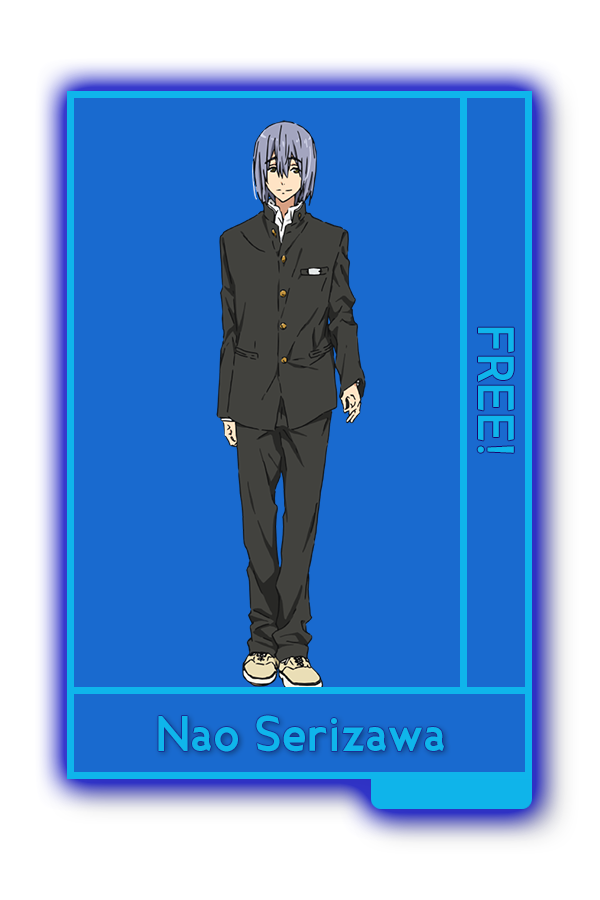
<style>
.page{position:relative;width:600px;height:900px;background:#196acf}
.page>*{position:absolute;margin:0}
.t1{font:47.8px "Ancillary-Bold";color:#0fb5eb}
.t2{font:46.7px "Ancillary-Bold";color:#0fb5eb}
</style>
<div class="page">
<p class="t1" style="left:477px;top:327px;width:37px;height:126px;rotate:90deg">FREE!</p>
<p class="t2" style="left:158px;top:715px;width:286px;height:37px">Nao Serizawa</p>
</div>
